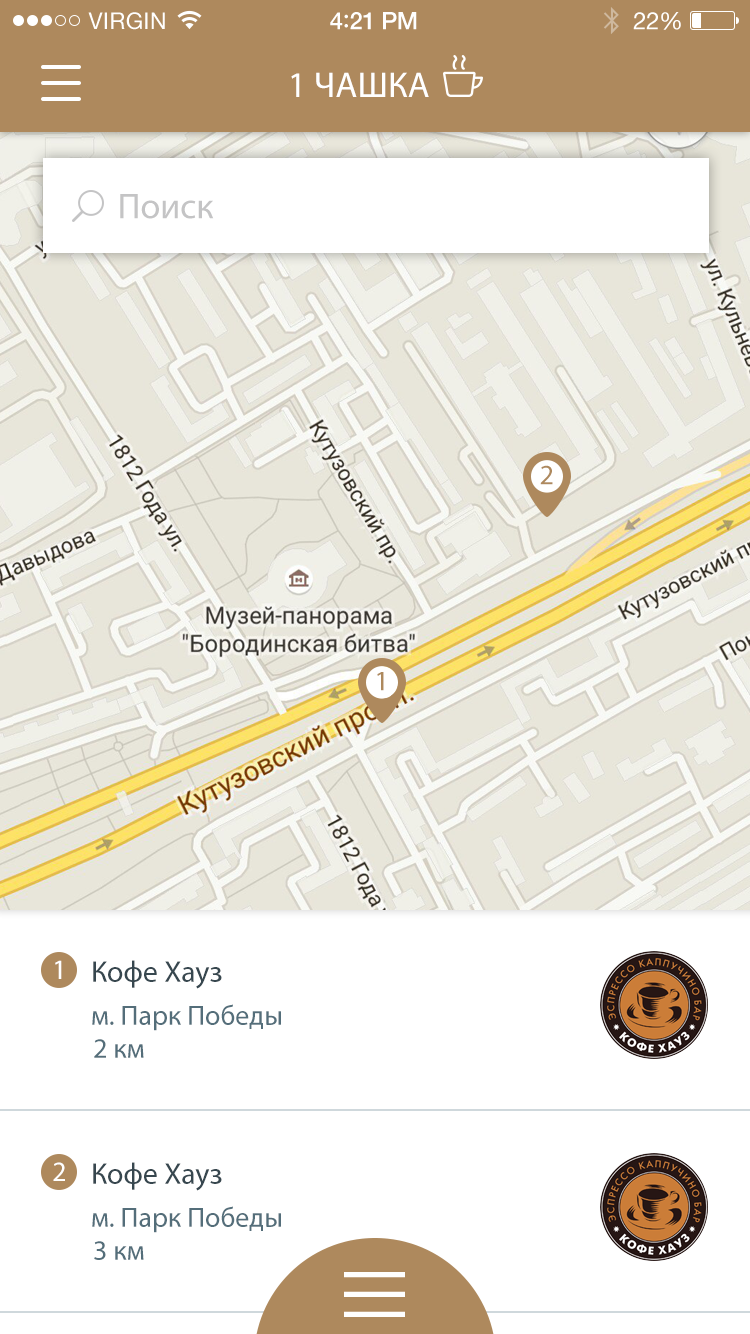
<style>
.page{position:relative;width:750px;height:1334px;background:#ffffff}
.page>*{position:absolute;margin:0}
.t1{font:23px "HelveticaNeue";letter-spacing:0.02em;color:#ffffff}
.t2{font:24px "HelveticaNeue-Medium";letter-spacing:-0.02em;color:#ffffff}
.t3{font:26px "Avenir-Medium";letter-spacing:-0.02em;color:#ffffff}
.t4{font:24px "HelveticaNeue";letter-spacing:-0.02em;color:#ffffff}
.t5{font:36px "MyriadPro-Regular";color:#ffffff;text-transform:uppercase}
.t6{font:36px "MyriadPro-Regular";color:#c4c4c5}
.t7{font:28px "MyriadPro-Regular";color:#ae895d;text-transform:uppercase}
.t8{font:28px "MyriadPro-Regular";color:#ffffff;text-transform:uppercase}
.t9{font:30px "MyriadPro-Regular";color:#37474f}
.t10{font:28px "MyriadPro-Regular";color:#546e7a}
</style>
<div class="page">
<p class="t1" style="left:88px;top:12px;width:77px;height:18px">VIRGIN</p>
<p class="t2" style="left:330px;top:12px;width:87px;height:18px">4<span class="t3">:</span>21 PM</p>
<p class="t4" style="left:633px;top:12px;width:48px;height:18px">22%</p>
<p class="t5" style="left:291px;top:72px;width:138px;height:25px">1 чашка</p>
<p class="t6" style="left:120px;top:194px;width:94px;height:25px">Поиск</p>
<p class="t7" style="left:540px;top:465px;width:13px;height:20px">2</p>
<p class="t7" style="left:377px;top:672px;width:7px;height:19px">1</p>
<p class="t8" style="left:55px;top:960px;width:7px;height:19px">1</p>
<p class="t9" style="left:93px;top:960px;width:129px;height:29px">Кофе Хауз</p>
<p class="t10" style="left:92px;top:1004px;width:189px;height:27px">м. Парк Победы</p>
<p class="t10" style="left:94px;top:1039px;width:50px;height:19px">2 км</p>
<p class="t8" style="left:53px;top:1162px;width:12px;height:19px">2</p>
<p class="t9" style="left:93px;top:1162px;width:129px;height:29px">Кофе Хауз</p>
<p class="t10" style="left:92px;top:1206px;width:189px;height:27px">м. Парк Победы</p>
<p class="t10" style="left:94px;top:1241px;width:50px;height:19px">3 км</p>
</div>
